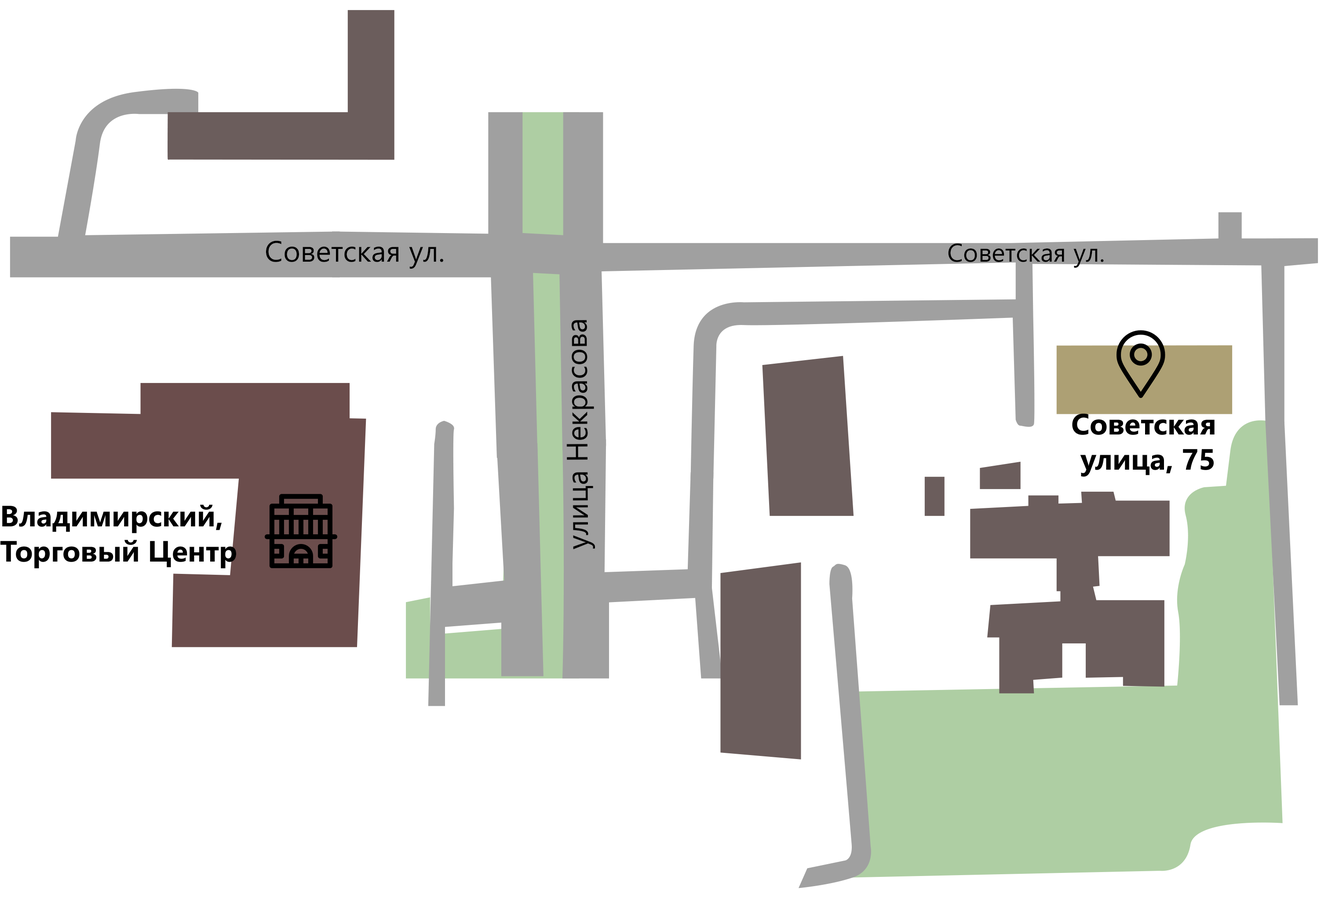
<style>
.page{position:relative;width:1328px;height:898px;background:#ffffff}
.page>*{position:absolute;margin:0}
.t1{font:29.3px "SegoeUI";color:#000000}
.t2{font:25.7px "SegoeUI";color:#000000}
.t3{font:29.3px "SegoeUI-Bold";color:#000000}
</style>
<div class="page">
<p class="t1" style="left:266px;top:241px;width:177px;height:28px">Советская ул.</p>
<p class="t2" style="left:948px;top:243px;width:156px;height:25px">Советская ул.</p>
<p class="t3" style="left:1072px;top:413px;width:143px;height:64px;text-align:center">Советская <br>улица, 75</p>
<p class="t3" style="left:0px;top:504px;width:236px;height:65px">Владимирский,<br>Торговый Центр</p>
</div>
